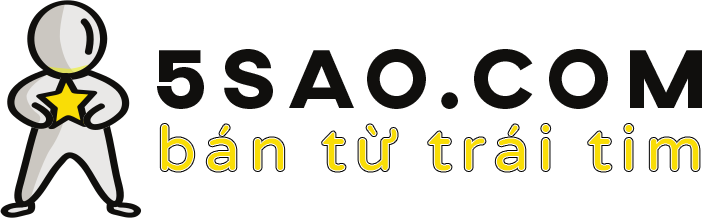
<style>
.page{position:relative;width:719px;height:218px;background:#ffffff}
.page>*{position:absolute;margin:0}
.t1{font:85px "AXIS-ExtraBold";letter-spacing:0.15em;color:#100f0d}
.t2{font:62px "VarelaRound-Regular";letter-spacing:0.15em;color:#f9dd06}
</style>
<div class="page">
<p class="t1" style="left:157px;top:49px;width:545px;height:60px">5sao.com</p>
<p class="t2" style="left:161px;top:125px;width:538px;height:46px">bán từ trái tim</p>
</div>
